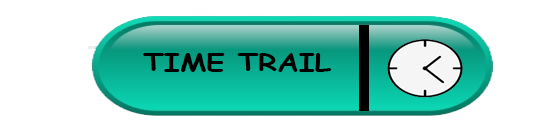
<style>
.page{position:relative;width:560px;height:140px;background:#ffffff}
.page>*{position:absolute;margin:0}
.t1{font:23.7px "ComicSansMS-Bold";color:#000000;scale:1.25 1}
</style>
<div class="page">
<p class="t1" style="left:143px;top:53px;width:188px;height:19px">TIME TRAIL</p>
</div>
